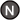
<style>
.page{position:relative;width:20px;height:20px;background:#ffffff}
.page>*{position:absolute;margin:0}
.t1{font:13px "ArialMT";color:#ffffff}
</style>
<div class="page">
<p class="t1" style="left:5px;top:5px;width:9px;height:11px">N</p>
</div>
